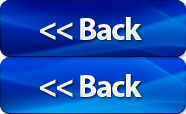
<style>
.page{position:relative;width:186px;height:114px}
.page>*{position:absolute;margin:0}
.t1{font:32px "MyriadPro-Bold";letter-spacing:-0.05em;color:#f8f8f8}
</style>
<div class="page">
<p class="t1" style="left:40px;top:17px;width:102px;height:23px">&lt;&lt; Back</p>
<p class="t1" style="left:40px;top:74px;width:102px;height:23px">&lt;&lt; Back</p>
</div>
